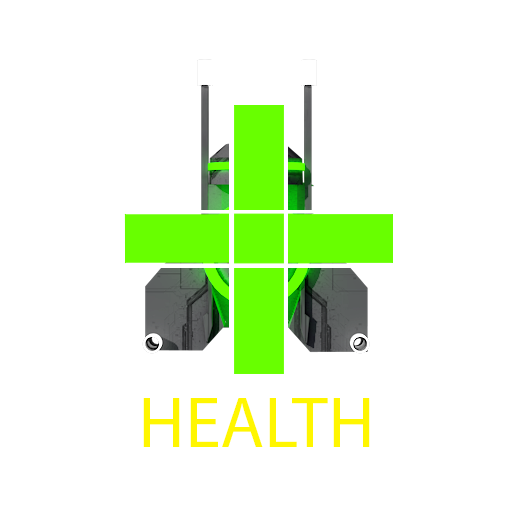
<style>
.page{position:relative;width:512px;height:512px;background:#ffffff}
.page>*{position:absolute;margin:0}
.t1{font:72px "MyriadPro-Regular";color:#fff600}
</style>
<div class="page">
<p class="t1" style="left:143px;top:398px;width:227px;height:49px">HEALTH</p>
</div>
